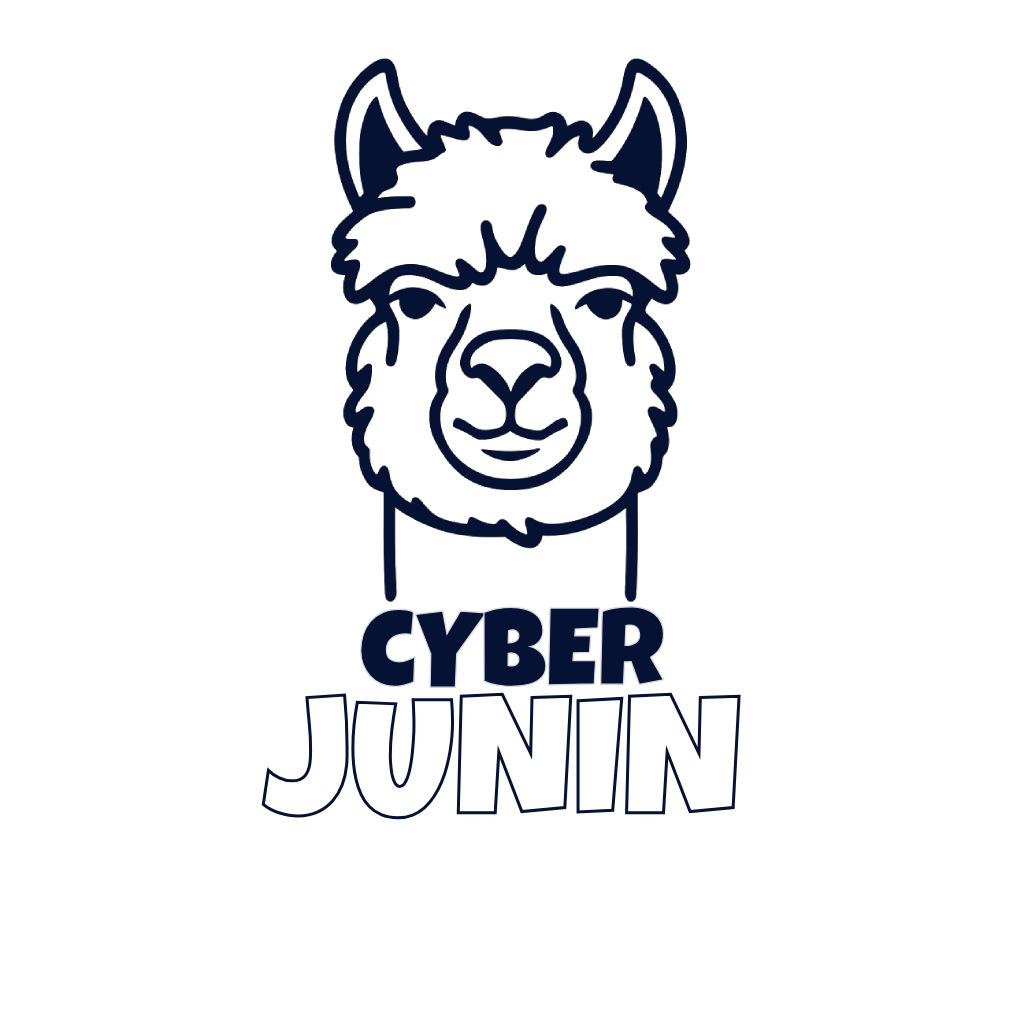
<style>
.page{position:relative;width:1024px;height:1024px;background:#ffffff}
.page>*{position:absolute;margin:0}
.t1{font:109.2px "LuckiestGuy-Regular";color:#061233}
.t2{font:168.1px "LuckiestGuy-Regular";color:#061233}
</style>
<div class="page">
<p class="t1" style="left:360px;top:606px;width:305px;height:82px">cYBER</p>
<p class="t2" style="left:261px;top:692px;width:480px;height:128px">JUNIN</p>
</div>
